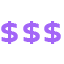
<style>
.page{position:relative;width:64px;height:64px;background:#ffffff}
.page>*{position:absolute;margin:0}
.t1{font:40.3px "Corbel-Bold";color:#a366f7}
</style>
<div class="page">
<p class="t1" style="left:1px;top:21px;width:60px;height:23px">$$$</p>
</div>
